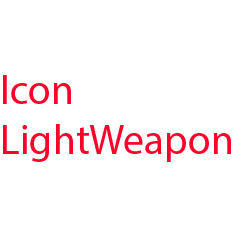
<style>
.page{position:relative;width:250px;height:250px;background:#ffffff}
.page>*{position:absolute;margin:0}
.t1{font:41.7px "MyriadPro-Regular";color:#ff002a}
</style>
<div class="page">
<p class="t1" style="left:3px;top:75px;width:228px;height:87px">Icon <br>LightWeapon</p>
</div>
